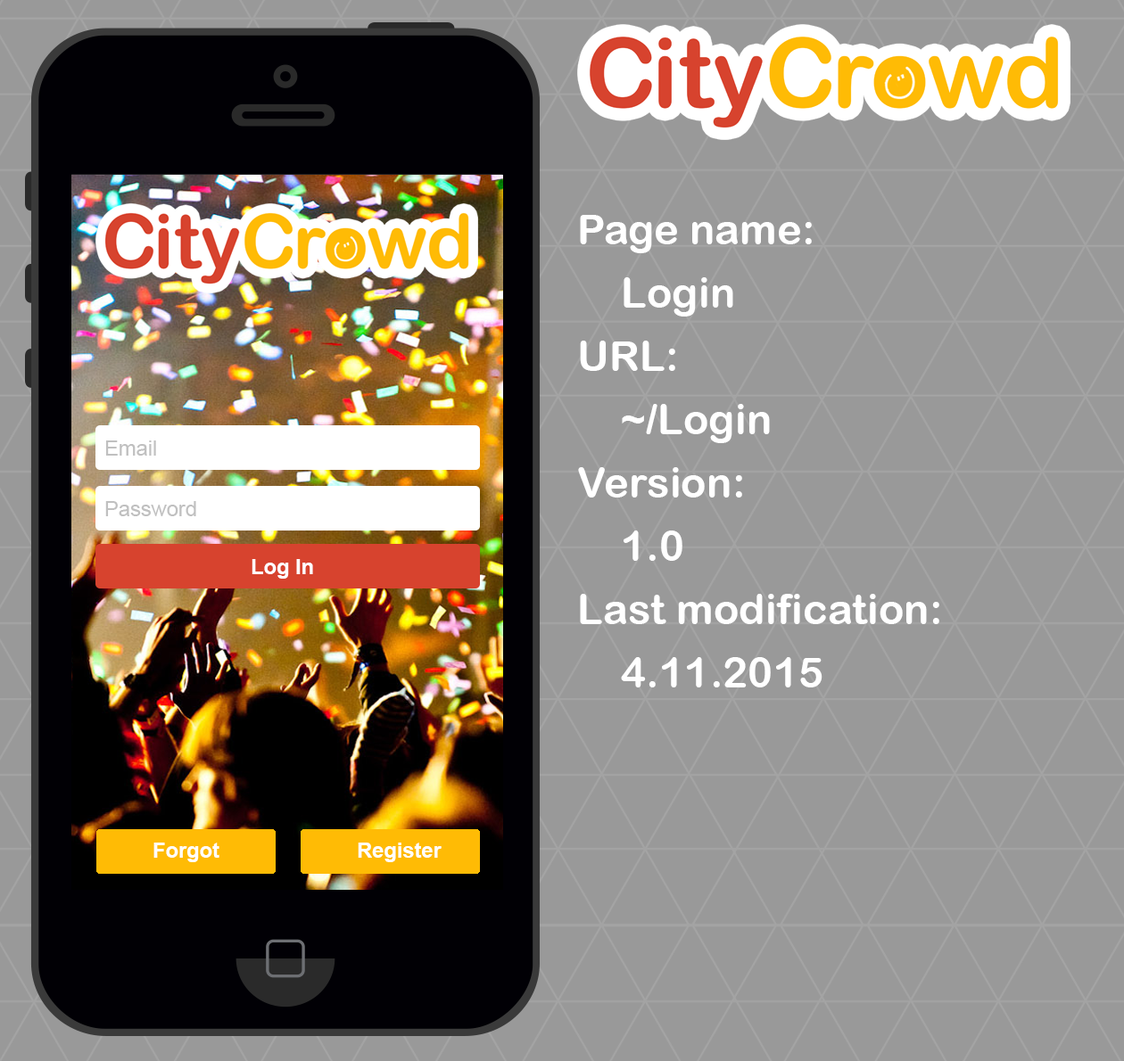
<style>
.page{position:relative;width:1124px;height:1061px;background:#999999}
.page>*{position:absolute;margin:0}
.t1{font:42.2px/63.3px "ArialRoundedMTBold";color:#ffffff}
.t2{font:21.1px "ArialMT";color:#c0c0c0}
.t3{font:21.1px "Arial-BoldMT";color:#ffffff}
</style>
<div class="page">
<p class="t1" style="left:578px;top:215px;width:361px;height:473px">Page name:<br>Login<br>URL:<br>~/Login<br>Version:<br>1.0<br>Last modification:<br>4.11.2015</p>
<p class="t2" style="left:105px;top:441px;width:51px;height:15px">Email</p>
<p class="t2" style="left:105px;top:501px;width:91px;height:15px">Password</p>
<p class="t3" style="left:251px;top:559px;width:62px;height:20px">Log In</p>
<p class="t3" style="left:153px;top:843px;width:66px;height:19px">Forgot</p>
<p class="t3" style="left:358px;top:843px;width:83px;height:19px">Register</p>
</div>
